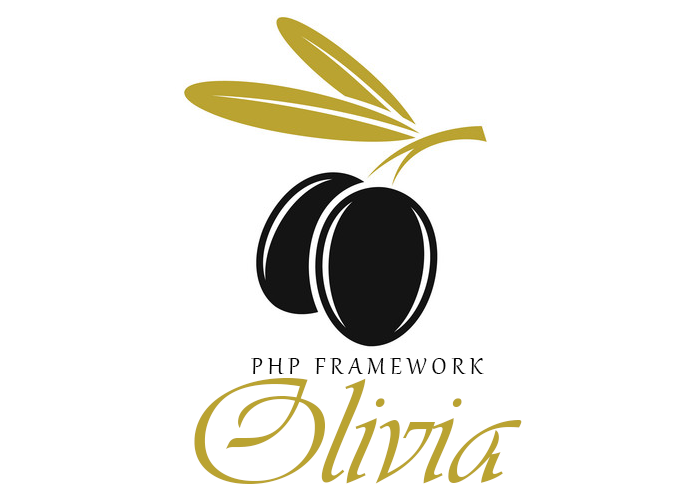
<style>
.page{position:relative;width:681px;height:496px;background:#ffffff}
.page>*{position:absolute;margin:0}
.t1{font:28px "Gabriola";color:#040404}
.t2{font:155px "Vivaldii";color:#baa331}
</style>
<div class="page">
<p class="t1" style="left:251px;top:358px;width:233px;height:16px">P H P   F R A M E W O R K</p>
<p class="t2" style="left:194px;top:378px;width:328px;height:106px">Olivia</p>
</div>
